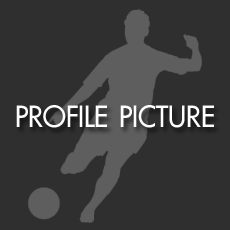
<style>
.page{position:relative;width:230px;height:230px;background:#2f2f2f}
.page>*{position:absolute;margin:0}
.t1{font:40.7px "PSLxKittithada-Bold";color:#ffffff}
</style>
<div class="page">
<p class="t1" style="left:16px;top:105px;width:198px;height:23px">PROFILE PICTURE</p>
</div>
